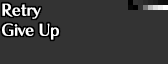
<style>
.page{position:relative;width:168px;height:64px;background:#333333}
.page>*{position:absolute;margin:0}
.t1{font:16px/20px "ChiaroStd-B";letter-spacing:-0.015em;color:#ffffff}
</style>
<div class="page">
<p class="t1" style="left:2px;top:3px;width:57px;height:37px">Retry<br>Give Up</p>
</div>
